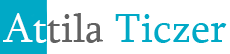
<style>
.page{position:relative;width:230px;height:54px;background:#ffffff}
.page>*{position:absolute;margin:0}
.t1{font:42.4px "Sylfaen";color:#616161}
.t2{font:42.4px "Sylfaen";color:#ffffff}
.t3{font:42.4px "Sylfaen";color:#00a9c6}
</style>
<div class="page">
<p class="t1" style="left:3px;top:13px;width:100px;height:30px"><span class="t2">At</span>tila</p>
<p class="t3" style="left:115px;top:14px;width:112px;height:29px">Ticzer</p>
</div>
